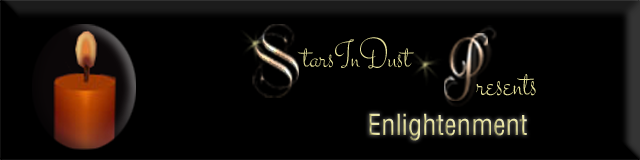
<style>
.page{position:relative;width:640px;height:160px;background:#000000}
.page>*{position:absolute;margin:0}
.t1{font:39.1px "Stalemate-Regular";color:#e5e098}
.t2{font:44px "Stalemate-Regular";color:#e5e098}
.t3{font:28.4px "HelveticaLTStd-Cond"}
</style>
<div class="page">
<p class="t1" style="left:297px;top:37px;width:117px;height:32px">tarsInDust</p>
<p class="t2" style="left:476px;top:74px;width:60px;height:22px">resents</p>
<p class="t3" style="left:369px;top:113px;width:158px;height:28px">Enlightenment</p>
</div>
